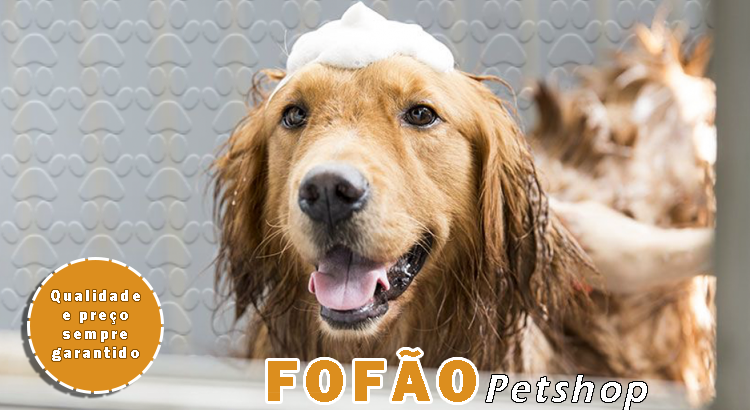
<style>
.page{position:relative;width:750px;height:410px}
.page>*{position:absolute;margin:0}
.t1{font:16px "FranklinGothic-Heavy";letter-spacing:0.11em;color:#ffffff}
.t2{font:60px "FranklinGothic-Heavy";letter-spacing:0.11em;color:#dc8e1e}
.t3{font:40.3px "ErasITC-Demi";letter-spacing:0.11em;color:#ffffff;scale:0.89 1}
</style>
<div class="page">
<p class="t1" style="left:51px;top:290px;width:89px;height:71px;text-align:center">Qualidade e preço sempre garantido</p>
<p class="t2" style="left:268px;top:350px;width:208px;height:52px">FOFÃO</p>
<p class="t3" style="left:486px;top:375px;width:161px;height:36px">Petshop</p>
</div>
